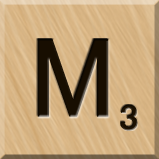
<style>
.page{position:relative;width:159px;height:159px}
.page>*{position:absolute;margin:0}
.t1{font:116px "MS-UIGothic";color:#180e01}
.t2{font:36px "MS-UIGothic";color:#1c1101;font-weight:bold;scale:1.1 1}
</style>
<div class="page">
<p class="t1" style="left:37px;top:39px;width:72px;height:78px">M</p>
<p class="t2" style="left:120px;top:104px;width:18px;height:27px">3</p>
</div>
